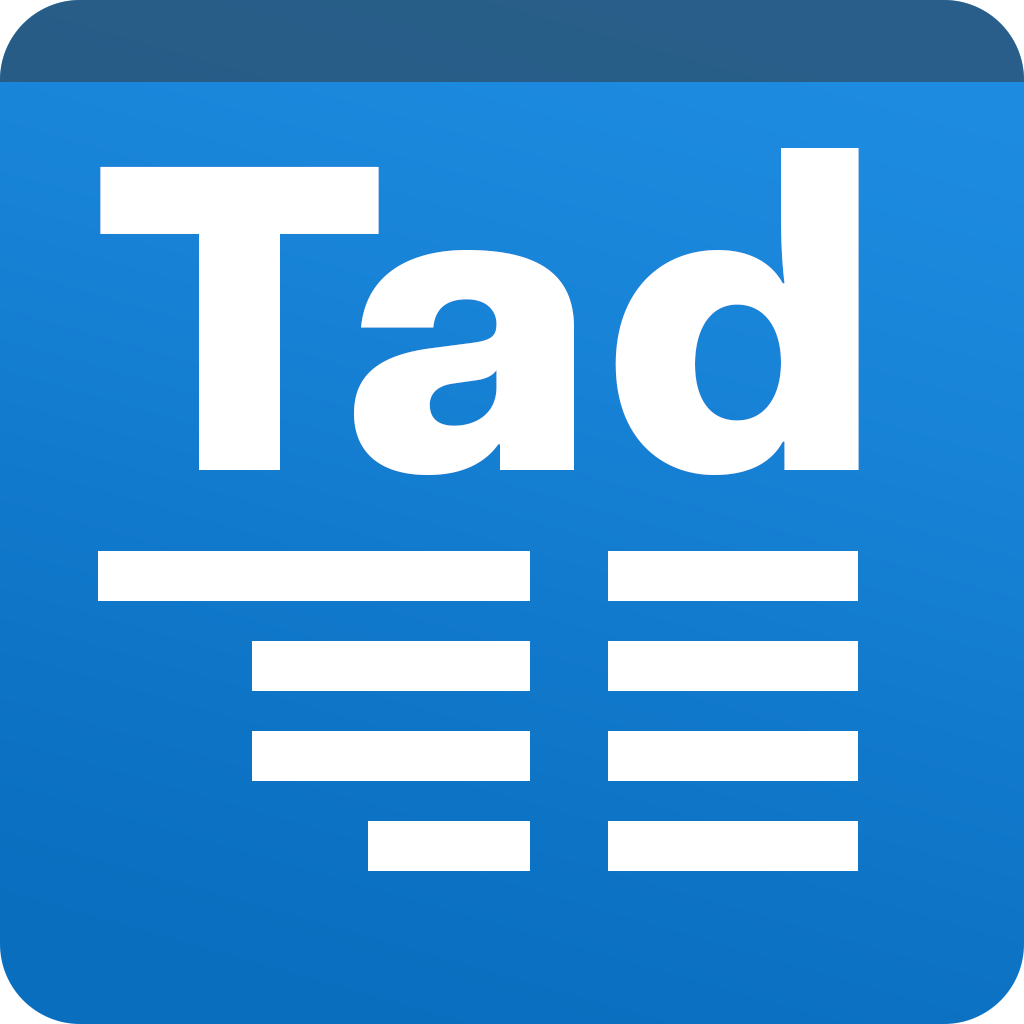
<style>
.page{position:relative;width:1024px;height:1024px;background:#ffffff}
.page>*{position:absolute;margin:0}
.t1{font:440px "FaktPro-Black";color:#ffffff}
</style>
<div class="page">
<p class="t1" style="left:100px;top:148px;width:759px;height:327px">Tad</p>
</div>
